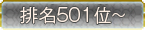
<style>
.page{position:relative;width:145px;height:30px}
.page>*{position:absolute;margin:0}
.t1{font:18px "GothicMB101Pr6N-Light";color:#fdeee3}
</style>
<div class="page">
<p class="t1" style="left:20px;top:6px;width:105px;height:18px">排名501位~</p>
</div>
